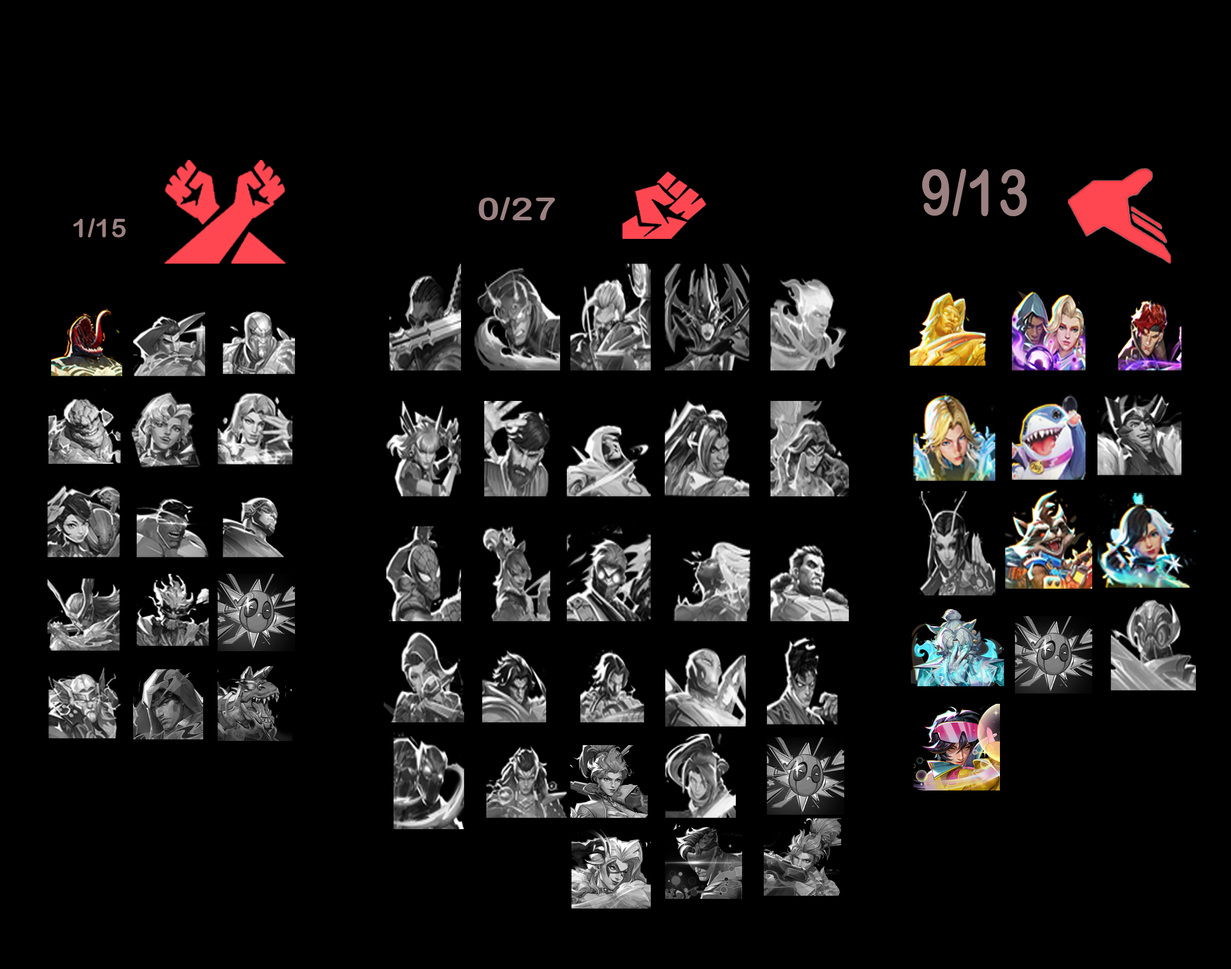
<style>
.page{position:relative;width:1231px;height:969px;background:#000000}
.page>*{position:absolute;margin:0}
.t1{font:63.9px "ArialRoundedMTBold";color:#9b8181;scale:0.82 1}
.t2{font:32.2px "ArialRoundedMTBold";color:#9b8181;scale:1.19 1}
.t3{font:26.5px "ArialRoundedMTBold";color:#9b8181}
</style>
<div class="page">
<p class="t1" style="left:922px;top:169px;width:105px;height:47px">9/13</p>
<p class="t2" style="left:479px;top:197px;width:76px;height:23px">0/27</p>
<p class="t3" style="left:73px;top:218px;width:53px;height:19px">1/15</p>
</div>
